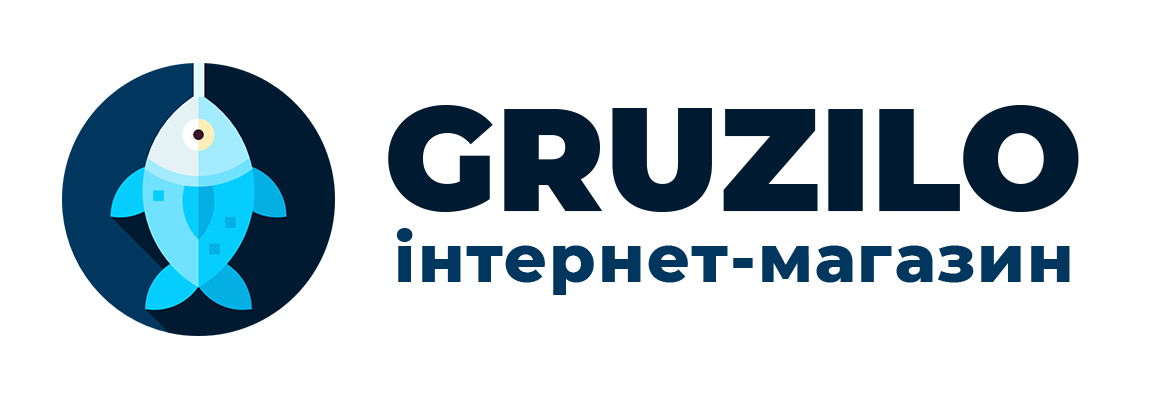
<style>
.page{position:relative;width:1157px;height:400px;background:#ffffff}
.page>*{position:absolute;margin:0}
.t1{font:145.8px "Montserrat-Black";color:#001a31}
.t2{font:66.7px "Montserrat-ExtraBold";letter-spacing:0.03em;color:#01375f}
</style>
<div class="page">
<p class="t1" style="left:388px;top:105px;width:691px;height:107px">GRUZILO</p>
<p class="t2" style="left:396px;top:228px;width:674px;height:67px">інтернет-магазин</p>
</div>
